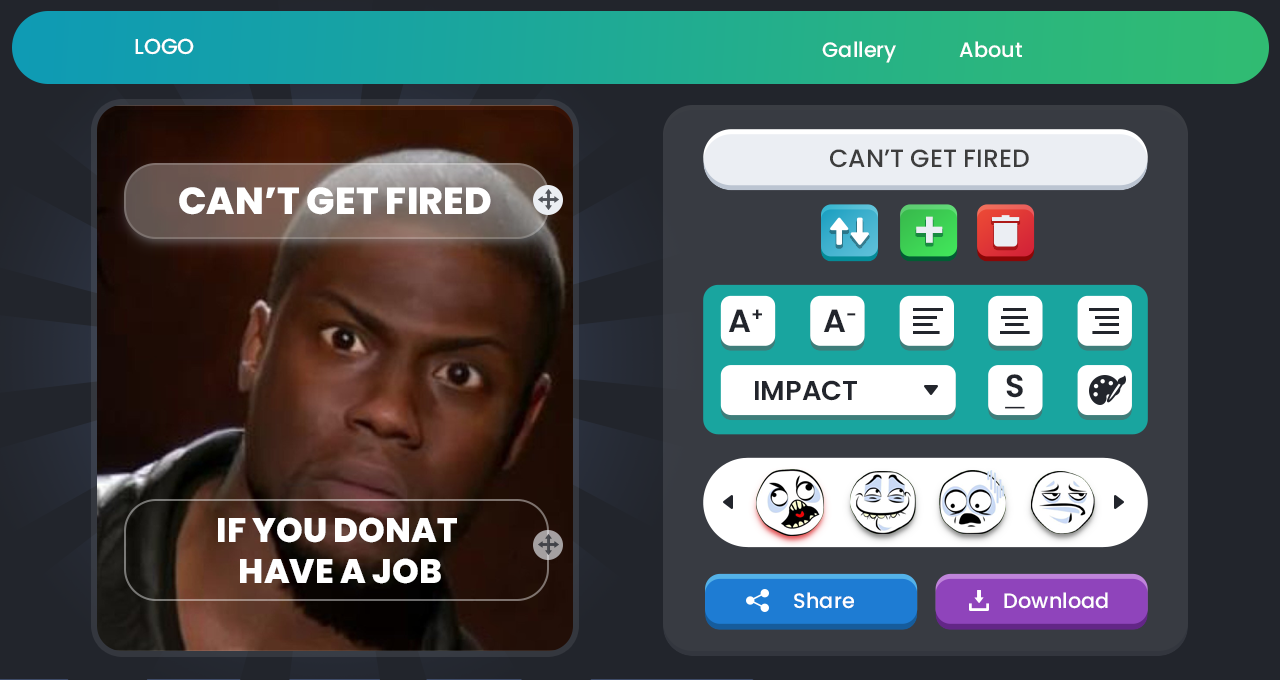
<style>
.page{position:relative;width:1280px;height:680px}
.page>*{position:absolute;margin:0}
.t1{font:21.7px "Poppins-Medium";color:#ffffff}
.t2{font:20.8px "Poppins-Medium";color:#ffffff}
.t3{font:25px "Poppins-Medium";color:#3d3d3d;text-transform:uppercase}
.t4{font:37.6px "Poppins-ExtraBold";color:#ffffff;text-transform:uppercase}
.t5{font:51.3px "Poppins-SemiBold";color:#ebeef3;text-transform:uppercase}
.t6{font:32px "Poppins-SemiBold";color:#22252c;text-transform:uppercase}
.t7{font:32px "Poppins-SemiBold";color:#22252c;text-transform:uppercase;text-decoration:underline}
.t8{font:27.3px "Poppins-SemiBold";color:#22252c;text-transform:uppercase}
.t9{font:34px "Poppins-ExtraBold";color:#ffffff;text-transform:uppercase}
</style>
<div class="page">
<p class="t1" style="left:135px;top:38px;width:59px;height:17px">LOGO</p>
<p class="t2" style="left:822px;top:41px;width:74px;height:22px">Gallery</p>
<p class="t2" style="left:959px;top:41px;width:63px;height:17px">About</p>
<p class="t3" style="left:830px;top:149px;width:199px;height:19px">can’t get fired</p>
<p class="t4" style="left:179px;top:187px;width:312px;height:28px">can’t get fired</p>
<p class="t5" style="left:916px;top:216px;width:27px;height:27px">+</p>
<p class="t6" style="left:728px;top:309px;width:34px;height:23px">A+</p>
<p class="t6" style="left:823px;top:309px;width:33px;height:23px">A-</p>
<p class="t7" style="left:1005px;top:374px;width:20px;height:35px">s</p>
<p class="t8" style="left:755px;top:380px;width:102px;height:21px">impact</p>
<p class="t9" style="left:218px;top:517px;width:239px;height:67px;text-align:center">if you donat <br>have a job</p>
<p class="t2" style="left:794px;top:592px;width:60px;height:17px">Share</p>
<p class="t2" style="left:1004px;top:592px;width:104px;height:17px">Download</p>
</div>
